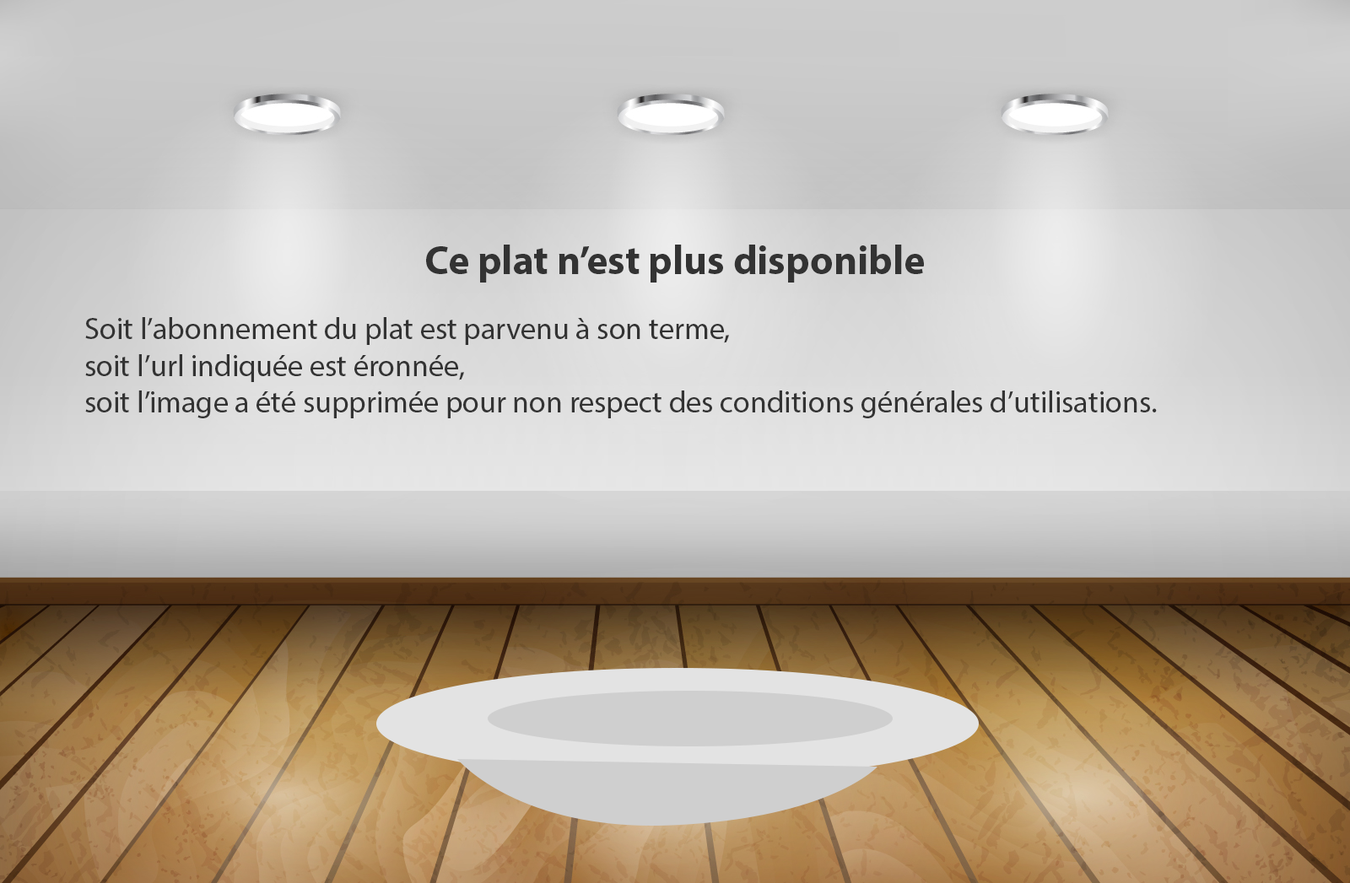
<style>
.page{position:relative;width:1350px;height:883px}
.page>*{position:absolute;margin:0}
.t1{font:40.5px "MyriadPro-Bold";color:#333333}
.t2{font:30.4px "MyriadPro-Regular";color:#333333}
</style>
<div class="page">
<p class="t1" style="left:426px;top:245px;width:498px;height:38px">Ce plat n’est plus disponible</p>
<p class="t2" style="left:85px;top:317px;width:1072px;height:101px"><span class="t1"><br></span>Soit l’abonnement du plat est parvenu à son terme,<br>soit l’url indiquée est éronnée,<br>soit l’image a été supprimée pour non respect des conditions générales d’utilisations.</p>
</div>
